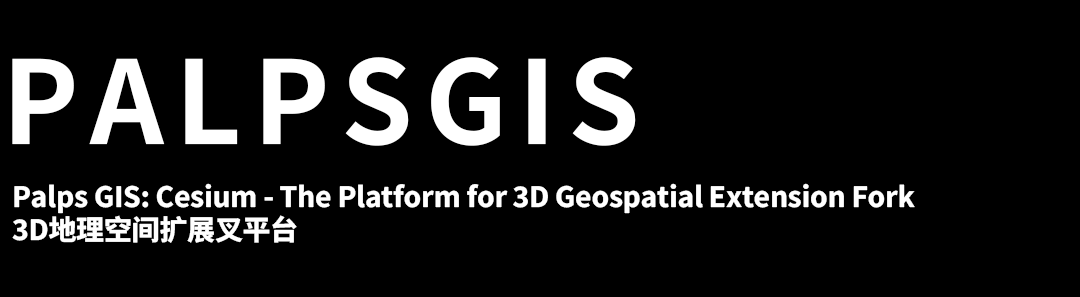
<style>
.page{position:relative;width:1080px;height:297px;background:#000000}
.page>*{position:absolute;margin:0}
.t1{font:114.9px "NotoSansSC-Bold";letter-spacing:0.1em;color:#ffffff}
.t2{font:28px "NotoSansSC-ExtraBold";letter-spacing:-0.01em;color:#ffffff}
</style>
<div class="page">
<p class="t1" style="left:12px;top:57px;width:624px;height:89px">PALPSGIS</p>
<p class="t2" style="left:12px;top:183px;width:903px;height:60px">Palps GIS: Cesium - The Platform for 3D Geospatial Extension Fork<br>3D地理空间扩展叉平台</p>
</div>
